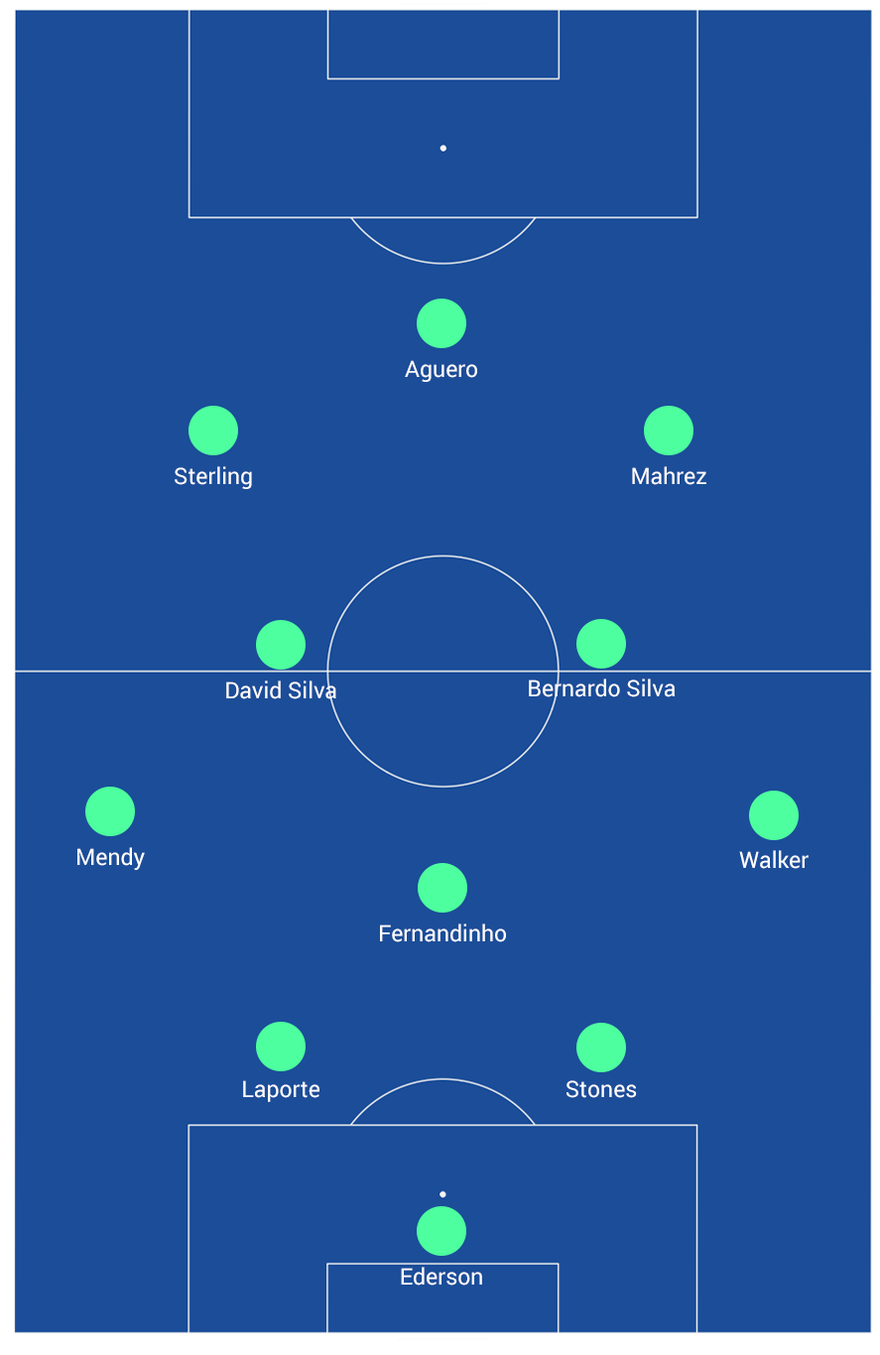
<style>
.page{position:relative;width:880px;height:1355px;background:#1b4d99}
.page>*{position:absolute;margin:0}
.t1{font:22.8px "Roboto-Regular";color:#ffffff}
</style>
<div class="page">
<p class="t1" style="left:405px;top:360px;width:72px;height:22px">Aguero</p>
<p class="t1" style="left:175px;top:466px;width:77px;height:23px">Sterling</p>
<p class="t1" style="left:632px;top:466px;width:74px;height:19px">Mahrez</p>
<p class="t1" style="left:226px;top:681px;width:110px;height:18px">David Silva</p>
<p class="t1" style="left:529px;top:679px;width:146px;height:18px">Bernardo Silva</p>
<p class="t1" style="left:77px;top:847px;width:68px;height:23px">Mendy</p>
<p class="t1" style="left:739px;top:850px;width:70px;height:19px">Walker</p>
<p class="t1" style="left:380px;top:924px;width:126px;height:18px">Fernandinho</p>
<p class="t1" style="left:243px;top:1080px;width:76px;height:22px">Laporte</p>
<p class="t1" style="left:566px;top:1080px;width:71px;height:18px">Stones</p>
<p class="t1" style="left:401px;top:1267px;width:81px;height:19px">Ederson</p>
</div>
